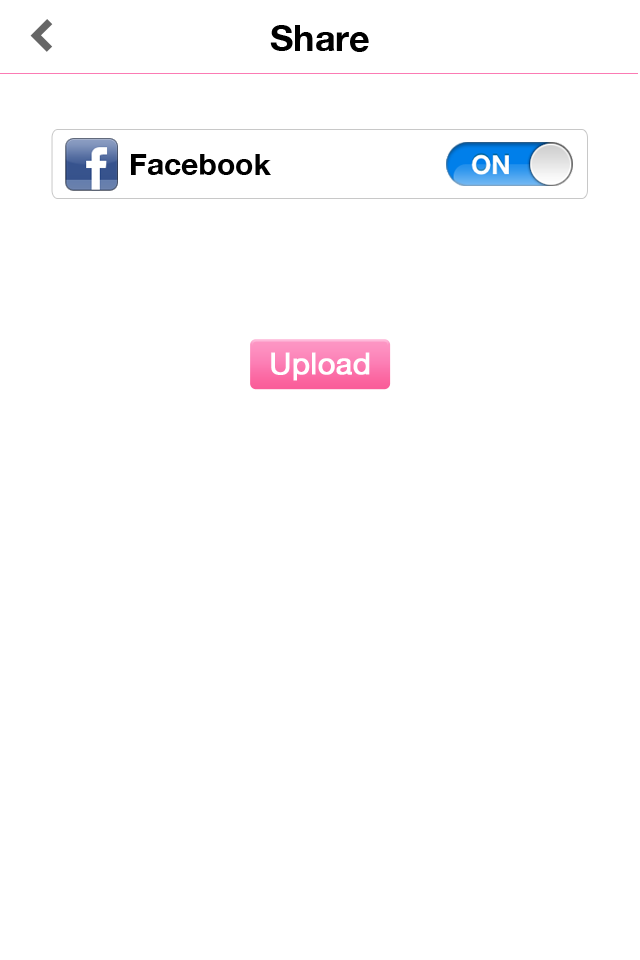
<style>
.page{position:relative;width:640px;height:960px;background:#ffffff}
.page>*{position:absolute;margin:0}
.t1{font:36px "HelveticaNeue-Bold";color:#000000}
.t2{font:30px "HelveticaNeue-Bold";color:#000000}
.t3{font:30px "HelveticaNeue";color:#ffffff;font-weight:bold}
</style>
<div class="page">
<p class="t1" style="left:270px;top:25px;width:99px;height:27px">Share</p>
<p class="t2" style="left:131px;top:154px;width:140px;height:21px">Facebook</p>
<p class="t3" style="left:271px;top:352px;width:99px;height:29px">Upload</p>
</div>
